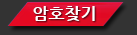
<style>
.page{position:relative;width:137px;height:35px;background:#333333}
.page>*{position:absolute;margin:0}
.t1{font:17px "NanumGothicBold";color:#ffffff}
</style>
<div class="page">
<p class="t1" style="left:33px;top:6px;width:62px;height:15px">암호찾기</p>
</div>
